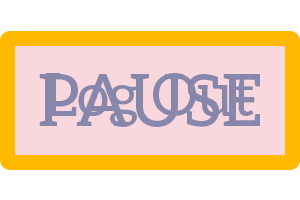
<style>
.page{position:relative;width:300px;height:200px;background:#f8d8dd}
.page>*{position:absolute;margin:0}
.t1{font:72px "Aleo-Regular";color:#8787ab}
.t2{font:60px "Aleo-Regular";color:#8787ab}
</style>
<div class="page">
<p class="t1" style="left:39px;top:74px;width:221px;height:53px">PAUSE</p>
<p class="t2" style="left:46px;top:73px;width:208px;height:54px">Log Out</p>
</div>
